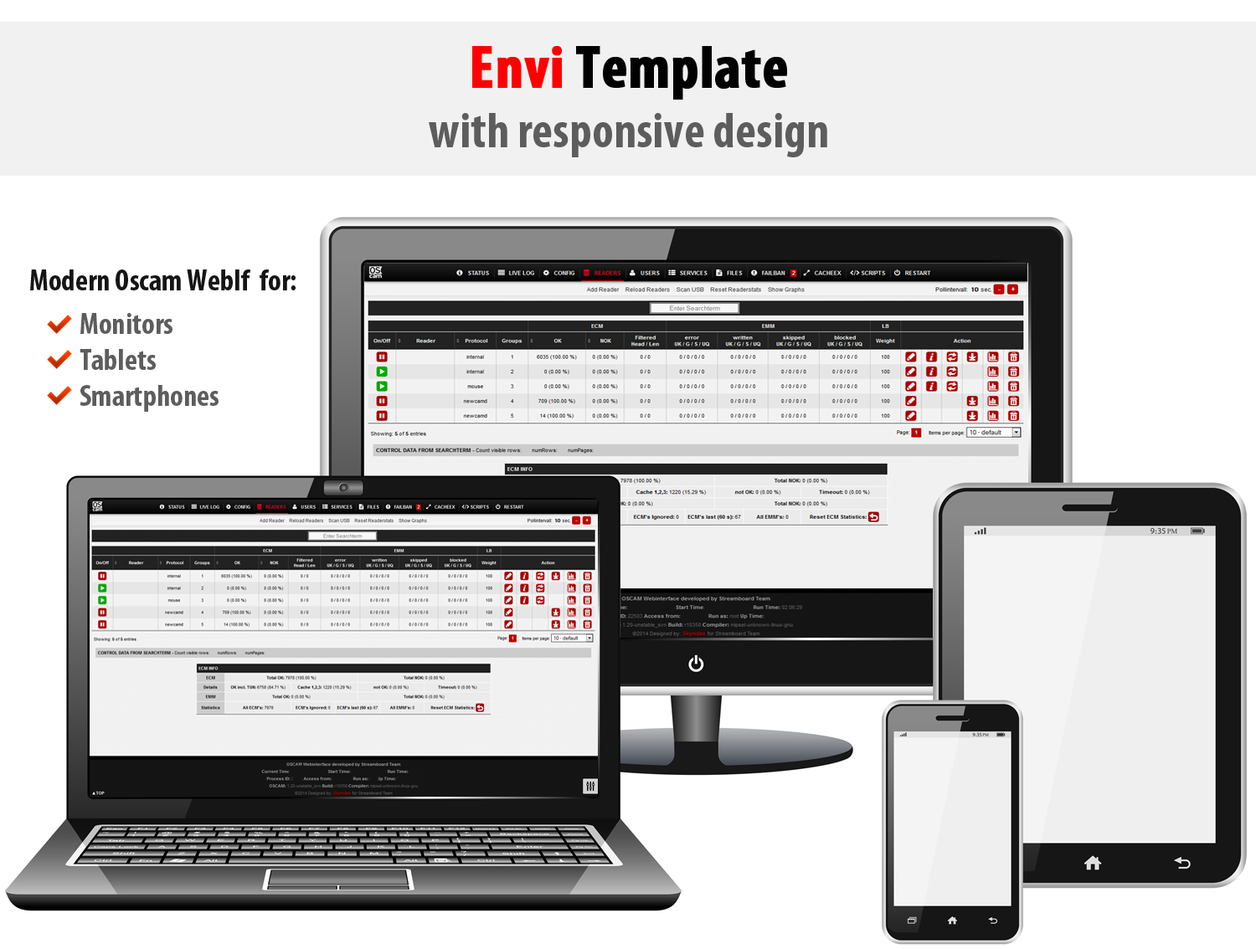
<style>
.page{position:relative;width:1256px;height:949px;background:#ffffff}
.page>*{position:absolute;margin:0}
.t1{font:50.2px "MyriadPro-BoldCond";color:#5d5d5d}
.t2{font:60.3px "MyriadPro-BoldCond";color:#fe0000;font-weight:bold}
.t3{font:60.3px "MyriadPro-BoldCond";color:#010101;font-weight:bold}
.t4{font:30.1px "MyriadPro-BoldCond";color:#151515}
.t5{font:30.1px "MyriadPro-BoldCond";color:#5d5d5d}
</style>
<div class="page">
<p class="t1" style="left:429px;top:46px;width:398px;height:111px;text-align:center"><span class="t2">Envi </span><span class="t3">Template<br></span>with responsive design</p>
<p class="t4" style="left:30px;top:270px;width:266px;height:21px">Modern Oscam WebIf  for:</p>
<p class="t5" style="left:80px;top:313px;width:139px;height:99px">Monitors<br>Tablets<br>Smartphones</p>
</div>
